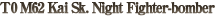
<style>
.page{position:relative;width:216px;height:16px;background:#ffffff}
.page>*{position:absolute;margin:0}
.t1{font:15px "RyuminPro-ExBold";letter-spacing:-0.08em;color:#4a3f32;font-weight:bold;scale:0.88 1}
</style>
<div class="page">
<p class="t1" style="left:0px;top:1px;width:215px;height:15px">T0 M62 Kai Sk. Night Fighter-bomber</p>
</div>
